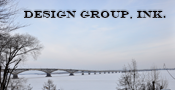
<style>
.page{position:relative;width:175px;height:90px}
.page>*{position:absolute;margin:0}
.t1{font:10.3px "EngraversMT";color:#040000}
</style>
<div class="page">
<p class="t1" style="left:24px;top:11px;width:142px;height:8px">design group, ink.</p>
</div>
